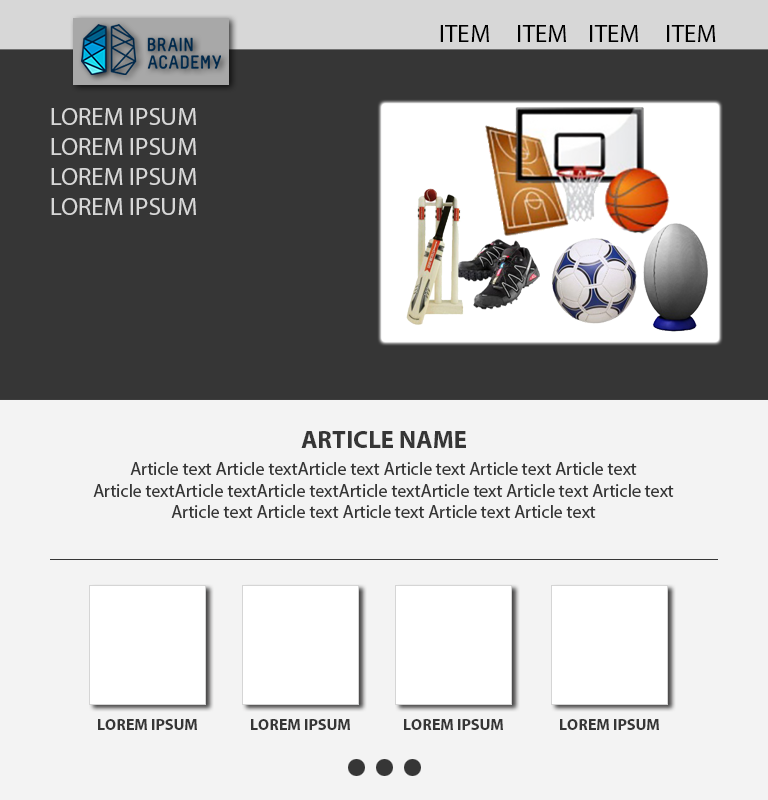
<style>
.page{position:relative;width:768px;height:800px;background:#f3f3f3}
.page>*{position:absolute;margin:0}
.t1{font:25px "MyriadPro-Regular";color:#000000}
.t2{font:25px "MyriadPro-Regular";color:#d7d7d7}
.t3{font:25px "MyriadPro-Bold";color:#363636;text-transform:uppercase}
.t4{font:18px "MyriadPro-Regular";color:#363636}
.t5{font:16px "MyriadPro-Bold";color:#363636;text-transform:uppercase}
</style>
<div class="page">
<p class="t1" style="left:440px;top:25px;width:276px;height:17px">ITEM     ITEM    ITEM     ITEM</p>
<p class="t2" style="left:51px;top:108px;width:145px;height:107px">LOREM IPSUM <br>LOREM IPSUM <br>LOREM IPSUM <br>LOREM IPSUM</p>
<p class="t3" style="left:301px;top:431px;width:165px;height:17px">Article name</p>
<p class="t4" style="left:93px;top:462px;width:581px;height:56px;text-align:center">Article text Article textArticle text Article text Article text Article text <br>Article textArticle textArticle textArticle textArticle text Article text Article text <br>Article text Article text Article text Article text Article text</p>
<p class="t5" style="left:98px;top:719px;width:99px;height:11px">LOREM IPSUM</p>
<p class="t5" style="left:251px;top:719px;width:99px;height:11px">LOREM IPSUM</p>
<p class="t5" style="left:404px;top:719px;width:99px;height:11px">LOREM IPSUM</p>
<p class="t5" style="left:560px;top:719px;width:99px;height:11px">LOREM IPSUM</p>
</div>
